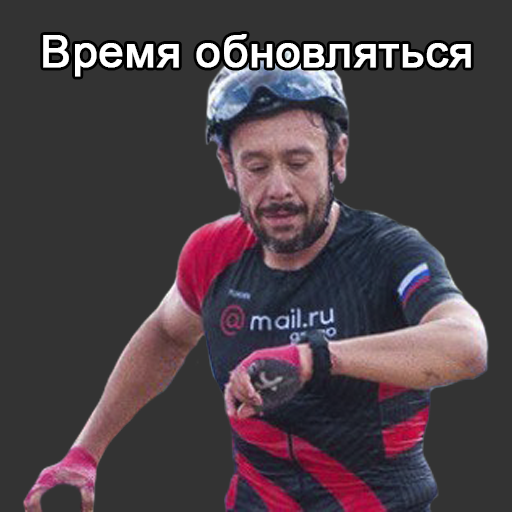
<style>
.page{position:relative;width:512px;height:512px;background:#333333}
.page>*{position:absolute;margin:0}
.t1{font:45px "ArialMT";color:#ffffff;font-weight:bold}
</style>
<div class="page">
<p class="t1" style="left:43px;top:34px;width:428px;height:43px">Время обновляться</p>
</div>
